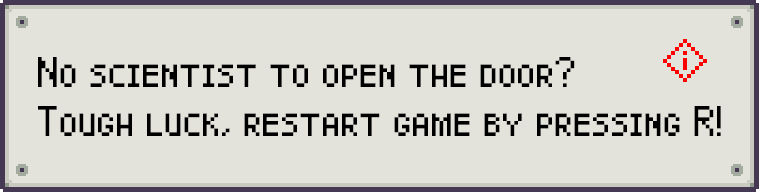
<style>
.page{position:relative;width:759px;height:192px;background:#e3e3db}
.page>*{position:absolute;margin:0}
.t1{font:30px/48.7px "Pixel-Caps";color:#000000}
</style>
<div class="page">
<p class="t1" style="left:38px;top:57px;width:683px;height:79px">No scientist to open the door?<br>Tough luck, restart game by pressing R!</p>
</div>
